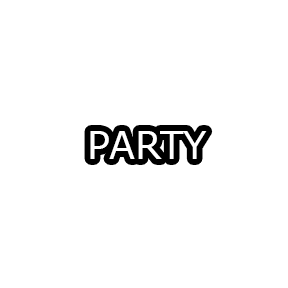
<style>
.page{position:relative;width:288px;height:288px;background:#ffffff}
.page>*{position:absolute;margin:0}
.t1{font:37.8px "Verdana";color:#ffffff}
</style>
<div class="page">
<p class="t1" style="left:90px;top:131px;width:117px;height:28px">PARTY</p>
</div>
